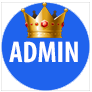
<style>
.page{position:relative;width:92px;height:92px;background:#1f63ed}
.page>*{position:absolute;margin:0}
.t1{font:30px "MyriadPro-BoldCond";color:#ffffff}
</style>
<div class="page">
<p class="t1" style="left:9px;top:41px;width:69px;height:22px">ADMIN</p>
</div>
